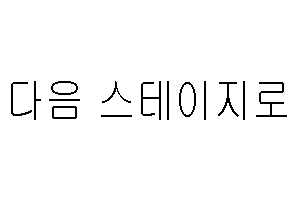
<style>
.page{position:relative;width:300px;height:200px;background:#ffffff}
.page>*{position:absolute;margin:0}
.t1{font:48.7px "Gulim";color:#000000;scale:0.8 1}
</style>
<div class="page">
<p class="t1" style="left:11px;top:81px;width:276px;height:39px">다음 스테이지로</p>
</div>
